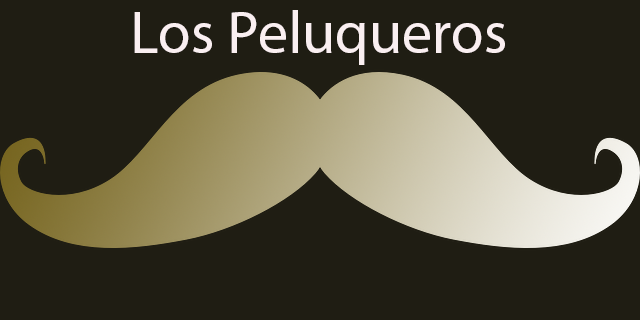
<style>
.page{position:relative;width:640px;height:320px;background:#1f1d13}
.page>*{position:absolute;margin:0}
.t1{font:60px "MyriadPro-Regular";color:#faeff1}
</style>
<div class="page">
<p class="t1" style="left:134px;top:10px;width:371px;height:55px">Los Peluqueros</p>
</div>
